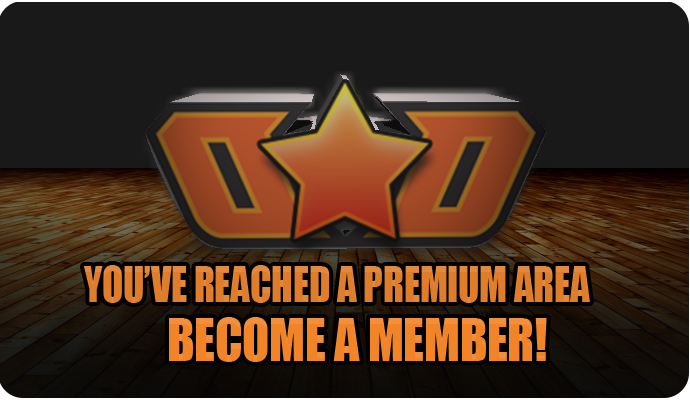
<style>
.page{position:relative;width:690px;height:400px;background:#191919}
.page>*{position:absolute;margin:0}
.t1{font:45.6px "Impact";color:#df7d2b;text-transform:uppercase;scale:0.85 1}
.t2{font:54px "Impact";color:#f28428;text-transform:uppercase;scale:0.92 1}
</style>
<div class="page">
<p class="t1" style="left:83px;top:265px;width:507px;height:38px">You’ve reached a premium area</p>
<p class="t2" style="left:169px;top:317px;width:378px;height:45px">Become a member!</p>
</div>
